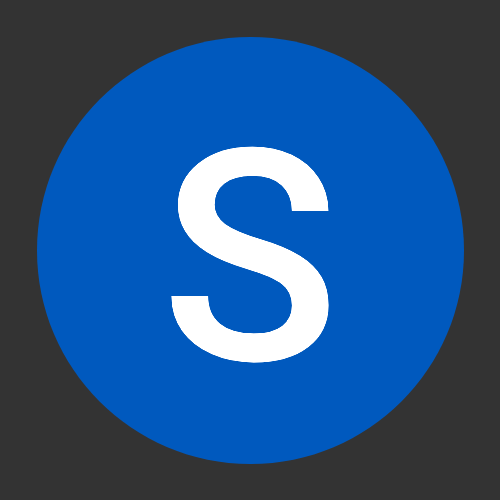
<style>
.page{position:relative;width:500px;height:500px;background:#0059be}
.page>*{position:absolute;margin:0}
.t1{font:295.4px "Roboto-Medium";color:#ffffff}
</style>
<div class="page">
<p class="t1" style="left:171px;top:146px;width:158px;height:217px">S</p>
</div>
